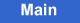
<style>
.page{position:relative;width:80px;height:23px;background:#3366cc}
.page>*{position:absolute;margin:0}
.t1{font:16px "Arial-BoldMT";color:#ffffff}
</style>
<div class="page">
<p class="t1" style="left:21px;top:3px;width:36px;height:13px">Main</p>
</div>
